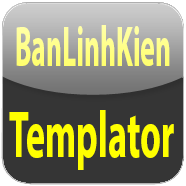
<style>
.page{position:relative;width:186px;height:186px;background:#353535}
.page>*{position:absolute;margin:0}
.t1{font:57px "MyriadPro-Bold";color:#ffff84;scale:0.48 1}
.t2{font:66.2px "MyriadPro-Bold";color:#ffff00;scale:0.55 1}
</style>
<div class="page">
<p class="t1" style="left:16px;top:25px;width:154px;height:41px">BanLinhKien</p>
<p class="t2" style="left:9px;top:110px;width:165px;height:60px">Templator</p>
</div>
